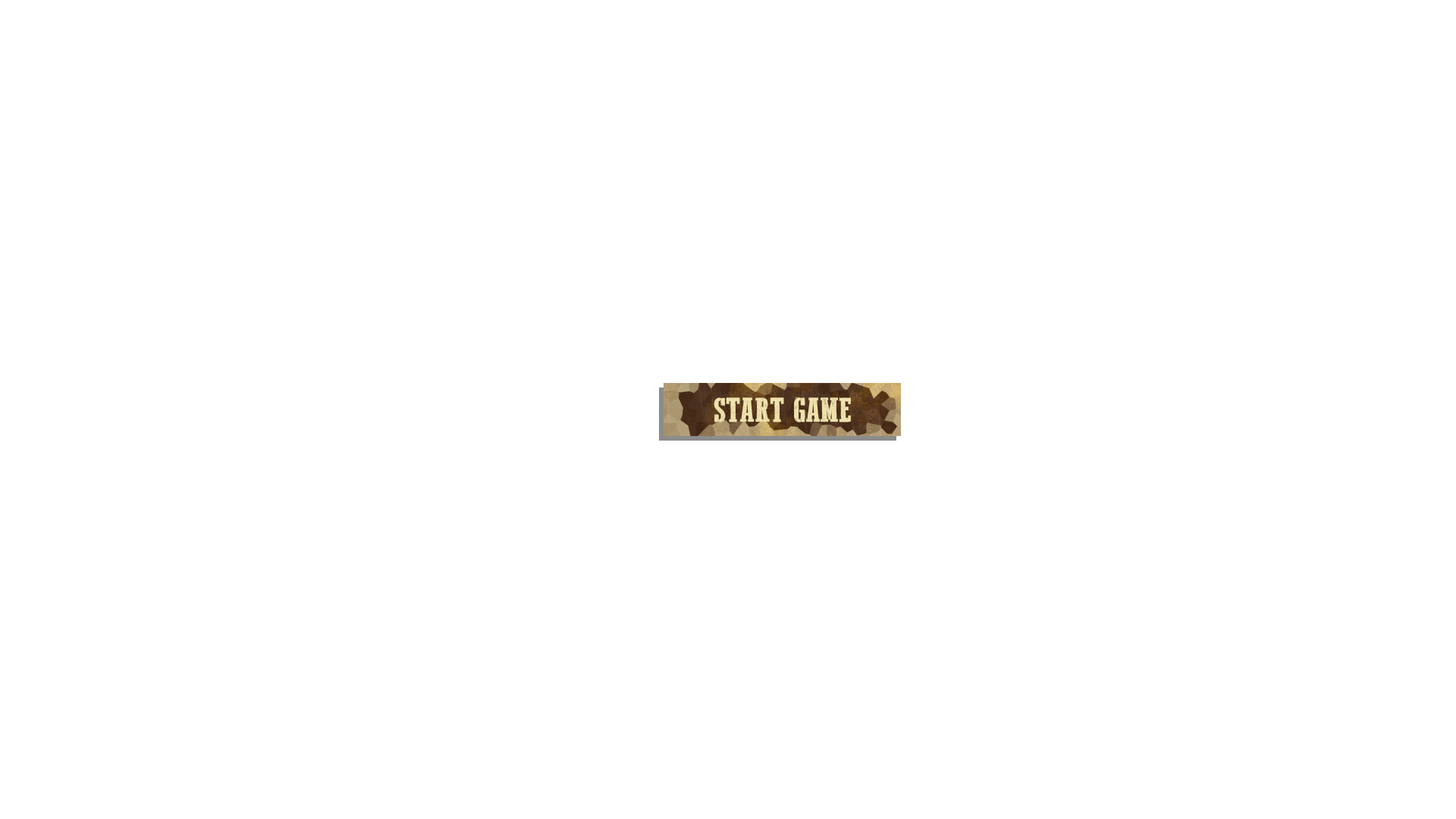
<style>
.page{position:relative;width:1456px;height:819px;background:#ffffff}
.page>*{position:absolute;margin:0}
.t1{font:35.4px "WesternBangBang";color:#f0e2ad}
</style>
<div class="page">
<p class="t1" style="left:714px;top:397px;width:137px;height:25px">START GAME</p>
</div>
